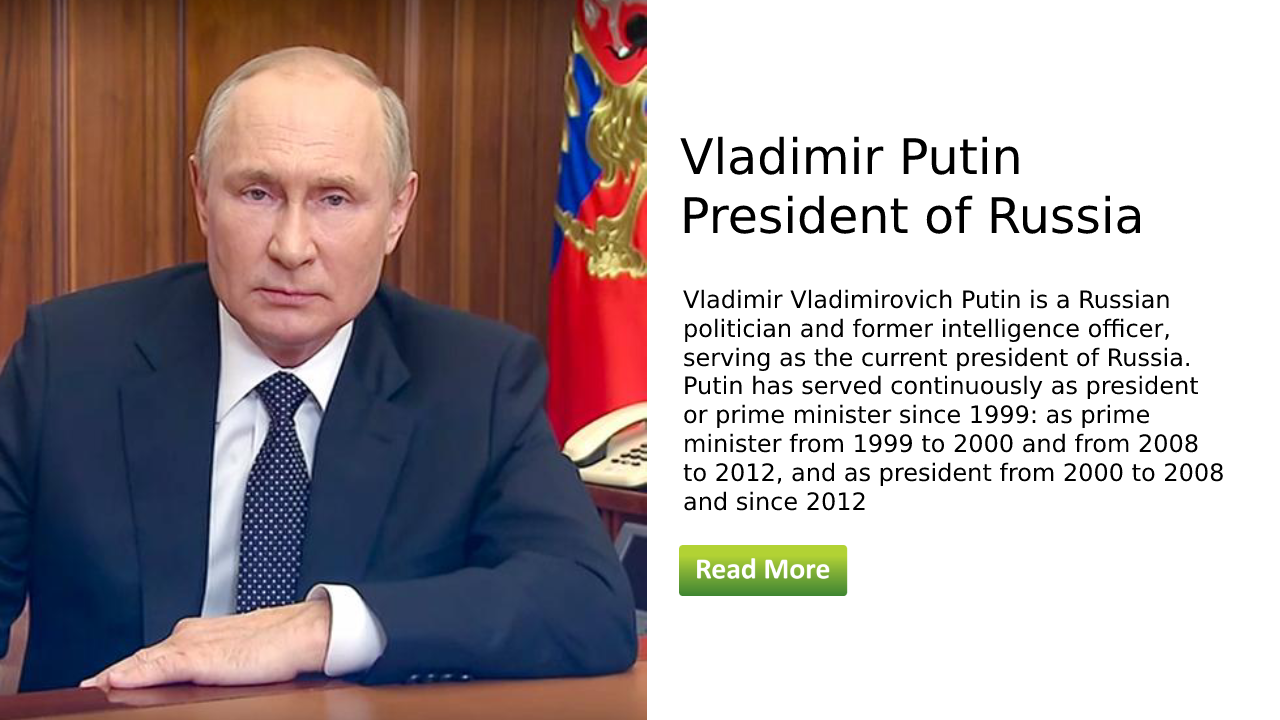
<style>
.page{position:relative;width:1280px;height:720px;background:#ffffff}
.page>*{position:absolute;margin:0}
.t1{font:49px "DejaVuSans";color:#000000}
.t2{font:24px "DejaVuSans";color:#000000}
</style>
<div class="page">
<p class="t1" style="left:680px;top:136px;width:461px;height:98px">Vladimir Putin<br>President of Russia</p>
<p class="t2" style="left:683px;top:289px;width:540px;height:222px">Vladimir Vladimirovich Putin is a Russian<br>politician and former intelligence officer, <br>serving as the current president of Russia. <br>Putin has served continuously as president<br>or prime minister since 1999: as prime<br>minister from 1999 to 2000 and from 2008 <br>to 2012, and as president from 2000 to 2008 <br>and since 2012</p>
</div>
